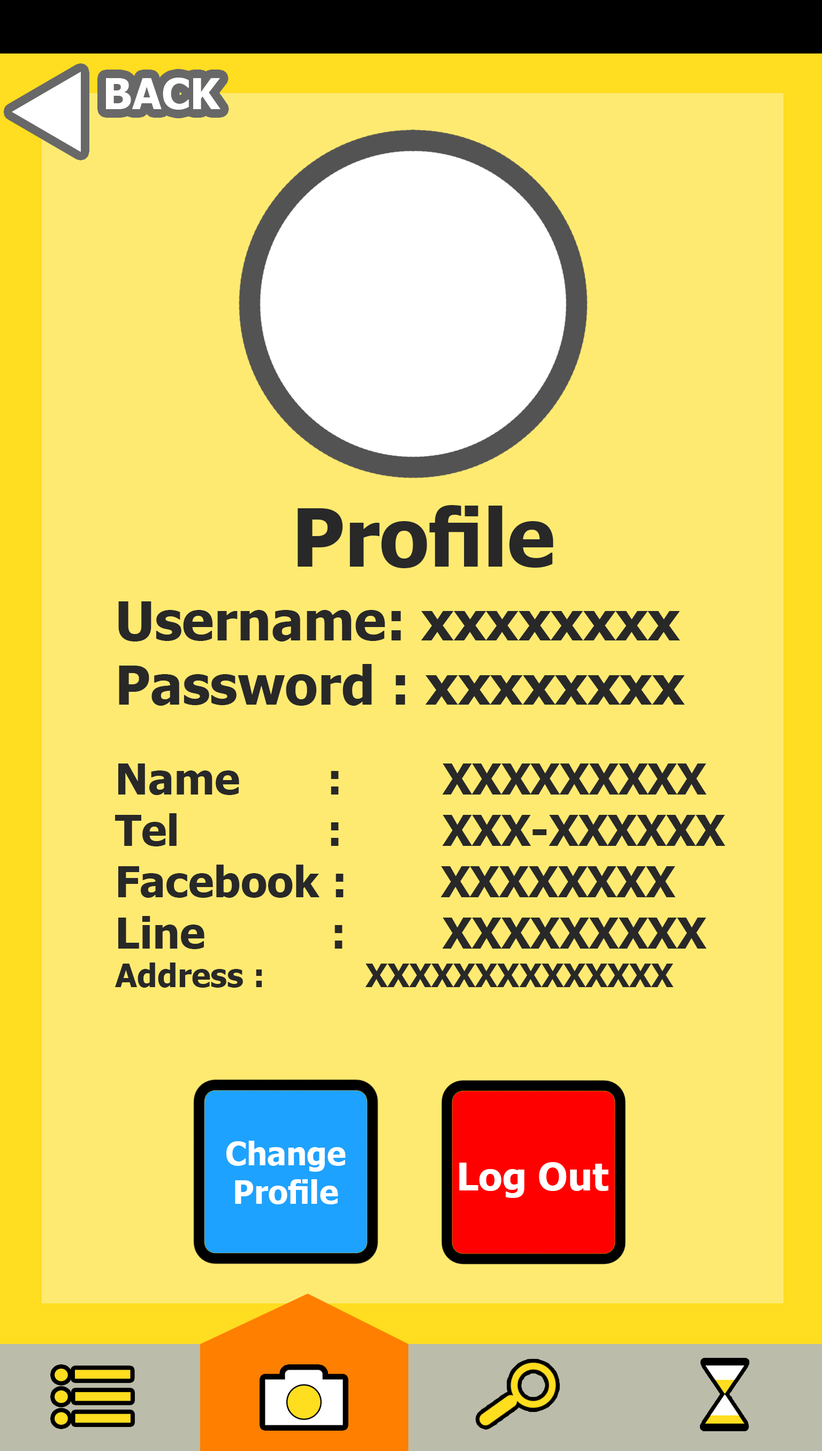
<style>
.page{position:relative;width:822px;height:1451px;background:#ffea71}
.page>*{position:absolute;margin:0}
.t1{font:80.3px "Tahoma-Bold";color:#282828}
.t2{font:42.8px "Tahoma-Bold";color:#282828}
.t3{font:53.5px "Tahoma-Bold";color:#282828}
.t4{font:32.1px "Tahoma-Bold";color:#282828}
.t5{font:32.1px "Tahoma-Bold";color:#ffffff}
.t6{font:38.5px "Tahoma-Bold";color:#ffffff}
</style>
<div class="page">
<p class="t1" style="left:297px;top:505px;width:256px;height:63px">Profile</p>
<p class="t2" style="left:115px;top:601px;width:610px;height:387px"><span class="t3">Username: xxxxxxxx<br>Password : xxxxxxxx<br><br></span>Name     :      XXXXXXXXX<br>Tel        :      XXX-XXXXXX<br>Facebook :        XXXXXXXX<br>Line          :     XXXXXXXXX<br><span class="t4">Address :        XXXXXXXXXXXXXX<br><br><br><br></span><br><br><span class="t3"></span></p>
<p class="t5" style="left:226px;top:1141px;width:120px;height:63px;text-align:center">Change<br>Profile</p>
<p class="t6" style="left:459px;top:1162px;width:149px;height:36px">Log Out</p>
</div>
